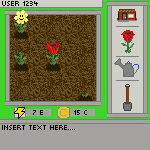
<style>
.page{position:relative;width:150px;height:150px}
.page>*{position:absolute;margin:0}
.t1{font:10px "MunroSmall";color:#020201}
.t2{font:10px "MunroSmall";color:#020202}
.t3{font:10px "MunroSmall";color:#000000}
</style>
<div class="page">
<p class="t1" style="left:2px;top:1px;width:36px;height:5px">User 1234</p>
<p class="t2" style="left:33px;top:110px;width:10px;height:5px">7 E</p>
<p class="t3" style="left:74px;top:110px;width:13px;height:5px">15 c</p>
<p class="t1" style="left:2px;top:125px;width:73px;height:5px">Insert TExt Here....</p>
</div>
